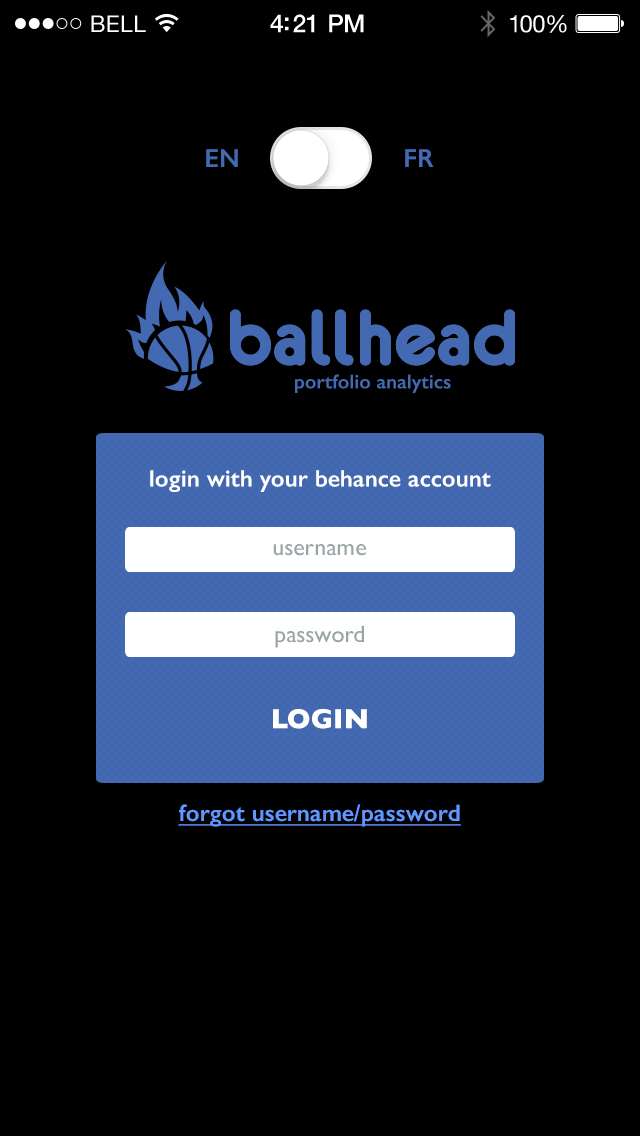
<style>
.page{position:relative;width:640px;height:1136px;background:#000000}
.page>*{position:absolute;margin:0}
.t1{font:26px "GillSans-SemiBold";color:#4369b2}
.t2{font:24px "GillSans-SemiBold";color:#ffffff}
.t3{font:24px "GillSans";color:#9ba5a8}
.t4{font:28px "GillSans-Bold";color:#ffffff}
.t5{font:24px "GillSans-SemiBold";color:#6096ff;text-decoration:underline}
</style>
<div class="page">
<p class="t1" style="left:206px;top:149px;width:32px;height:18px">EN</p>
<p class="t1" style="left:405px;top:149px;width:29px;height:18px">FR</p>
<p class="t2" style="left:150px;top:470px;width:341px;height:22px">login with your behance account</p>
<p class="t3" style="left:273px;top:544px;width:93px;height:12px">username</p>
<p class="t3" style="left:275px;top:625px;width:89px;height:23px">password</p>
<p class="t4" style="left:273px;top:709px;width:94px;height:20px">LOGIN</p>
<p class="t5" style="left:178px;top:804px;width:283px;height:23px">forgot username/password</p>
</div>
